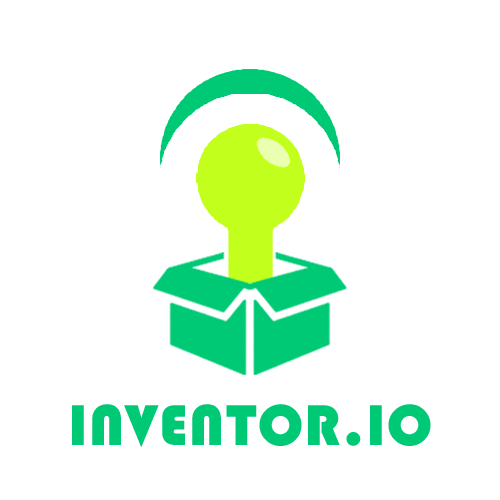
<style>
.page{position:relative;width:500px;height:500px;background:#ffffff}
.page>*{position:absolute;margin:0}
.t1{font:59.9px "Bauhaus93";letter-spacing:0.025em;color:#00c976}
</style>
<div class="page">
<p class="t1" style="left:72px;top:404px;width:359px;height:43px">INVENTOR.IO</p>
</div>
